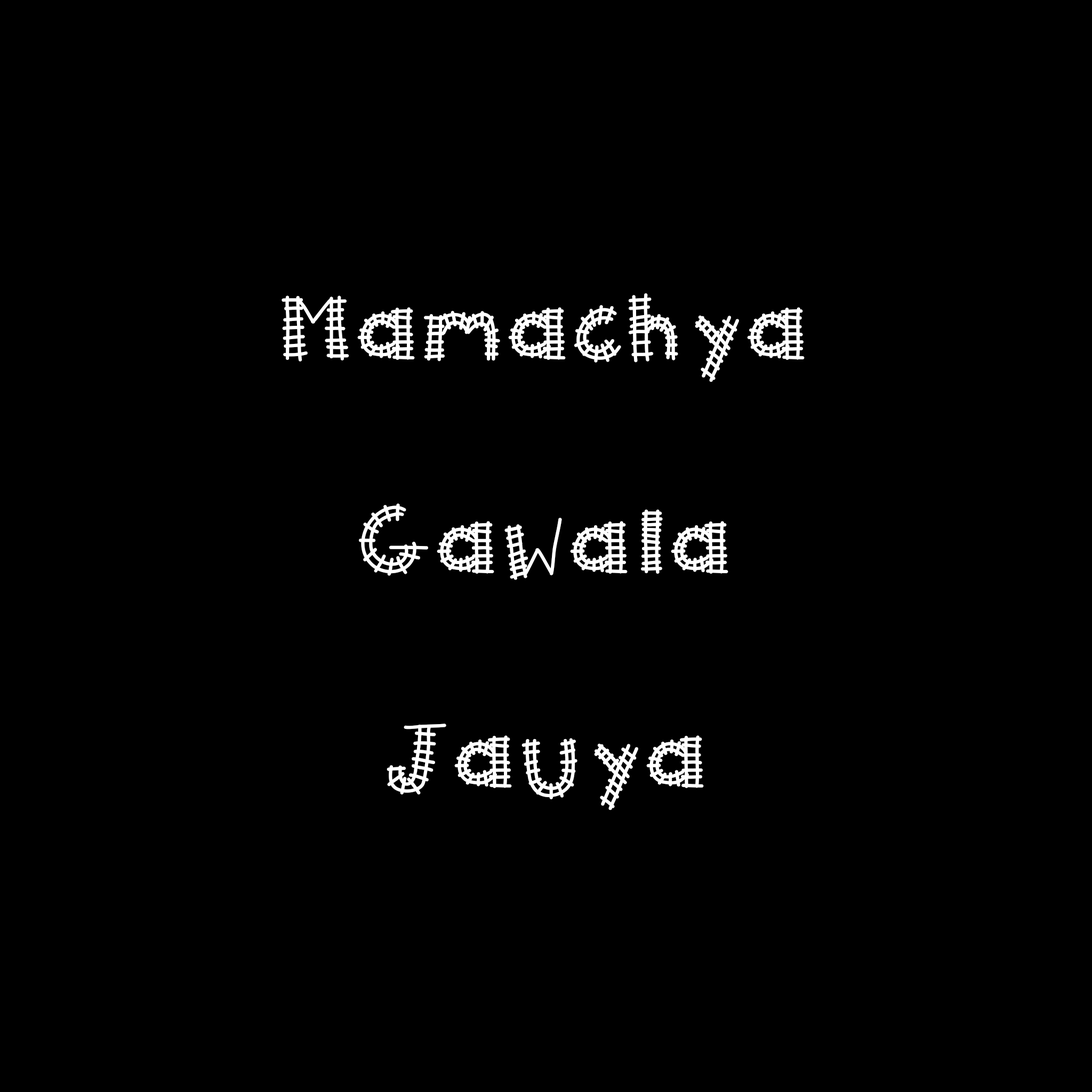
<style>
.page{position:relative;width:1092px;height:1092px;background:#000000}
.page>*{position:absolute;margin:0}
.t1{font:89.1px "KBAllAboard";color:#ffffff}
</style>
<div class="page">
<p class="t1" style="left:282px;top:293px;width:523px;height:517px;text-align:center">Mamachya<br><br>Gawala<br><br>Jauya</p>
</div>
